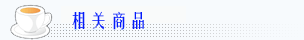
<style>
.page{position:relative;width:304px;height:40px;background:#f7fafd}
.page>*{position:absolute;margin:0}
.t1{font:18px "FZYTK--GBK1-0";letter-spacing:0.1em;color:#031afa}
</style>
<div class="page">
<p class="t1" style="left:72px;top:11px;width:72px;height:19px">相关商品</p>
</div>
